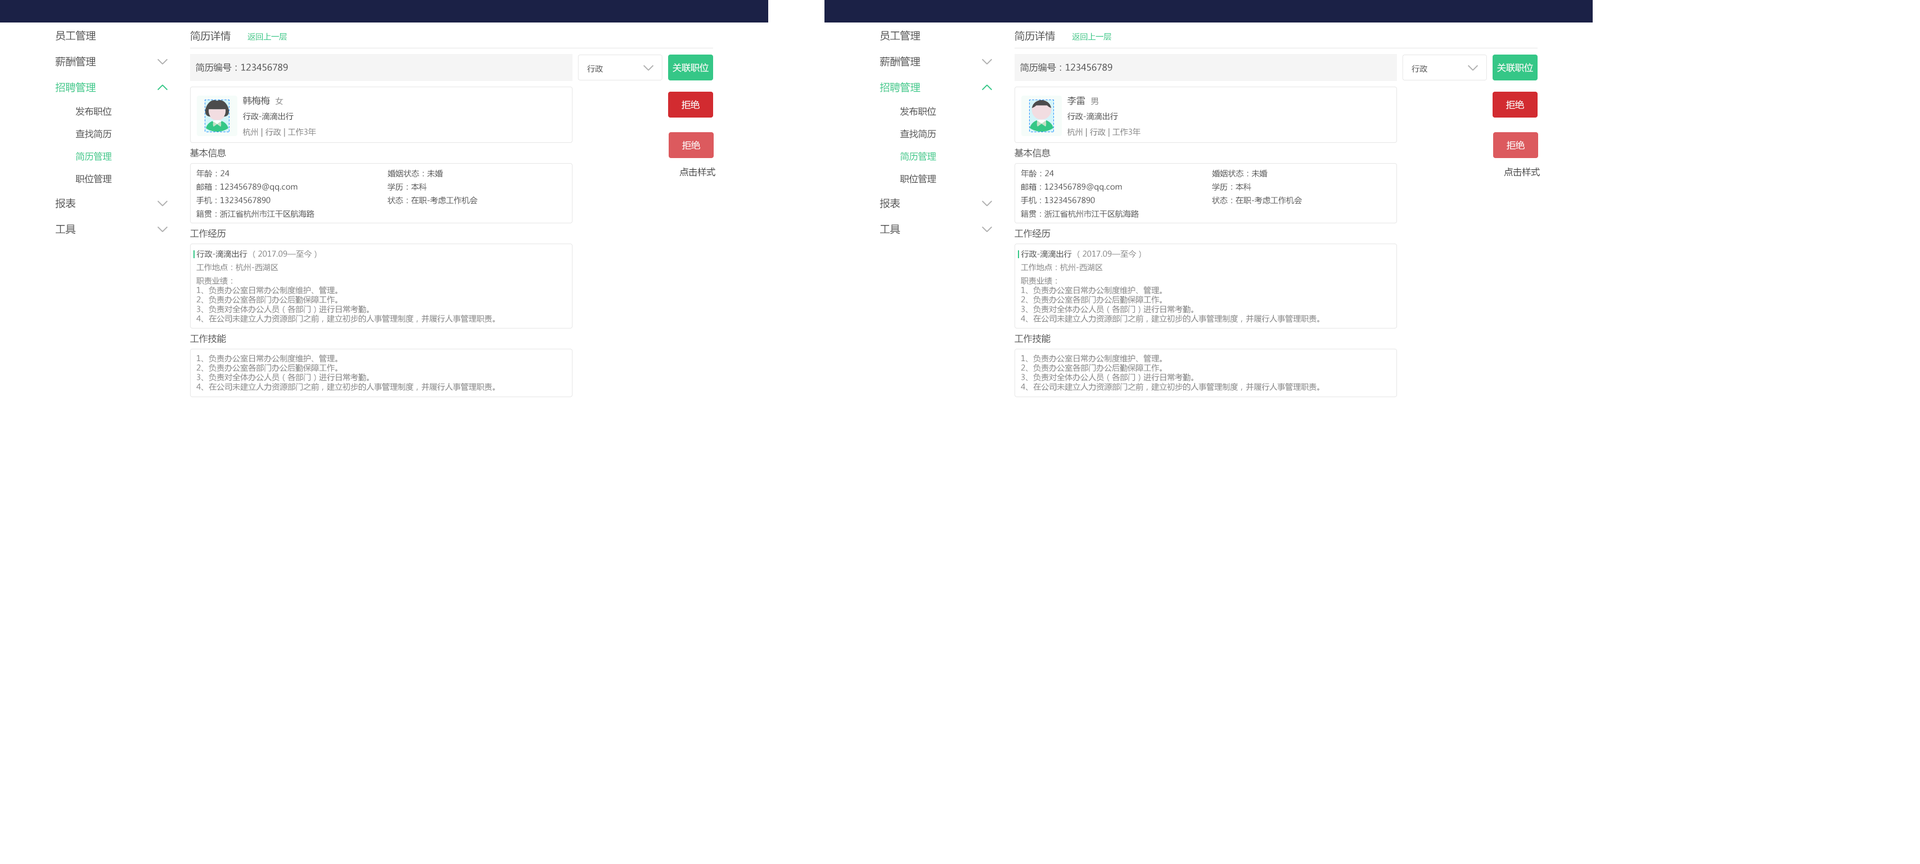
<style>
.page{position:relative;width:1920px;height:864px;background:#ffffff}
.page>*{position:absolute;margin:0}
.t1{font:10.1px "MicrosoftYaHei";color:#4d4d4d}
.t2{font:7.9px "MicrosoftYaHei";color:#35c787}
.t3{font:9px "MicrosoftYaHei";color:#4d4d4d}
.t4{font:7.9px "MicrosoftYaHei";color:#4d4d4d}
.t5{font:9px "MicrosoftYaHei";color:#ffffff}
.t6{font:10.1px "MicrosoftYaHei";color:#35c787}
.t7{font:7.9px "MicrosoftYaHei";color:#808080}
.t8{font:9px "MicrosoftYaHei";color:#35c787}
.t9{font:9px "MicrosoftYaHei";color:#393939}
.t10{font:7.7px "MicrosoftYaHei";color:#4d4d4d}
.t11{font:7.7px "MicrosoftYaHei";color:#808080}
</style>
<div class="page">
<p class="t1" style="left:56px;top:30px;width:40px;height:10px">员工管理</p>
<p class="t1" style="left:190px;top:30px;width:41px;height:11px">简历详情</p>
<p class="t2" style="left:248px;top:33px;width:39px;height:7px">返回上一层</p>
<p class="t1" style="left:880px;top:30px;width:41px;height:10px">员工管理</p>
<p class="t1" style="left:1015px;top:30px;width:40px;height:11px">简历详情</p>
<p class="t2" style="left:1072px;top:33px;width:40px;height:7px">返回上一层</p>
<p class="t1" style="left:55px;top:56px;width:41px;height:10px">薪酬管理</p>
<p class="t3" style="left:196px;top:63px;width:92px;height:9px">简历编号：123456789</p>
<p class="t4" style="left:587px;top:65px;width:16px;height:8px">行政</p>
<p class="t5" style="left:673px;top:63px;width:36px;height:9px">关联职位</p>
<p class="t1" style="left:880px;top:56px;width:41px;height:10px">薪酬管理</p>
<p class="t3" style="left:1020px;top:63px;width:93px;height:9px">简历编号：123456789</p>
<p class="t4" style="left:1412px;top:65px;width:16px;height:8px">行政</p>
<p class="t5" style="left:1497px;top:63px;width:36px;height:9px">关联职位</p>
<p class="t6" style="left:55px;top:82px;width:41px;height:10px">招聘管理</p>
<p class="t6" style="left:880px;top:82px;width:41px;height:10px">招聘管理</p>
<p class="t3" style="left:243px;top:96px;width:27px;height:9px">韩梅梅</p>
<p class="t7" style="left:276px;top:97px;width:8px;height:8px">女</p>
<p class="t5" style="left:682px;top:100px;width:18px;height:9px">拒绝</p>
<p class="t3" style="left:1068px;top:96px;width:17px;height:9px">李雷</p>
<p class="t7" style="left:1091px;top:97px;width:8px;height:8px">男</p>
<p class="t5" style="left:1506px;top:100px;width:18px;height:9px">拒绝</p>
<p class="t3" style="left:75px;top:107px;width:37px;height:9px">发布职位</p>
<p class="t4" style="left:243px;top:112px;width:51px;height:8px">行政-滴滴出行</p>
<p class="t3" style="left:900px;top:107px;width:37px;height:9px">发布职位</p>
<p class="t4" style="left:1068px;top:112px;width:50px;height:8px">行政-滴滴出行</p>
<p class="t3" style="left:75px;top:129px;width:37px;height:9px">查找简历</p>
<p class="t7" style="left:243px;top:128px;width:73px;height:9px">杭州 | 行政 | 工作3年</p>
<p class="t3" style="left:900px;top:129px;width:37px;height:9px">查找简历</p>
<p class="t7" style="left:1068px;top:128px;width:73px;height:9px">杭州 | 行政 | 工作3年</p>
<p class="t3" style="left:190px;top:148px;width:36px;height:10px">基本信息</p>
<p class="t5" style="left:682px;top:141px;width:18px;height:9px">拒绝</p>
<p class="t3" style="left:1015px;top:148px;width:36px;height:10px">基本信息</p>
<p class="t5" style="left:1507px;top:141px;width:18px;height:9px">拒绝</p>
<p class="t8" style="left:75px;top:152px;width:37px;height:9px">简历管理</p>
<p class="t8" style="left:900px;top:152px;width:37px;height:9px">简历管理</p>
<p class="t4" style="left:196px;top:169px;width:34px;height:9px">年龄：24</p>
<p class="t4" style="left:388px;top:169px;width:55px;height:8px">婚姻状态：未婚</p>
<p class="t9" style="left:680px;top:167px;width:36px;height:10px">点击样式</p>
<p class="t4" style="left:1021px;top:169px;width:33px;height:9px">年龄：24</p>
<p class="t4" style="left:1212px;top:169px;width:56px;height:8px">婚姻状态：未婚</p>
<p class="t9" style="left:1504px;top:167px;width:36px;height:10px">点击样式</p>
<p class="t3" style="left:75px;top:174px;width:37px;height:9px">职位管理</p>
<p class="t10" style="left:197px;top:183px;width:101px;height:9px">邮箱：123456789@qq.com</p>
<p class="t10" style="left:388px;top:183px;width:39px;height:8px">学历：本科</p>
<p class="t3" style="left:900px;top:174px;width:37px;height:9px">职位管理</p>
<p class="t10" style="left:1022px;top:183px;width:100px;height:9px">邮箱：123456789@qq.com</p>
<p class="t10" style="left:1212px;top:183px;width:40px;height:8px">学历：本科</p>
<p class="t1" style="left:55px;top:198px;width:21px;height:10px">报表</p>
<p class="t4" style="left:196px;top:196px;width:75px;height:8px">手机：13234567890</p>
<p class="t4" style="left:388px;top:196px;width:90px;height:8px">状态：在职-考虑工作机会</p>
<p class="t1" style="left:880px;top:198px;width:21px;height:10px">报表</p>
<p class="t4" style="left:1021px;top:196px;width:74px;height:8px">手机：13234567890</p>
<p class="t4" style="left:1212px;top:196px;width:90px;height:8px">状态：在职-考虑工作机会</p>
<p class="t4" style="left:196px;top:210px;width:118px;height:8px">籍贯：浙江省杭州市江干区航海路</p>
<p class="t4" style="left:1021px;top:210px;width:118px;height:8px">籍贯：浙江省杭州市江干区航海路</p>
<p class="t1" style="left:56px;top:224px;width:20px;height:10px">工具</p>
<p class="t3" style="left:190px;top:229px;width:36px;height:9px">工作经历</p>
<p class="t1" style="left:880px;top:224px;width:21px;height:10px">工具</p>
<p class="t3" style="left:1015px;top:229px;width:36px;height:9px">工作经历</p>
<p class="t4" style="left:196px;top:250px;width:52px;height:8px">行政-滴滴出行</p>
<p class="t7" style="left:253px;top:250px;width:64px;height:8px">（2017.09—至今）</p>
<p class="t4" style="left:1021px;top:250px;width:51px;height:8px">行政-滴滴出行</p>
<p class="t7" style="left:1078px;top:250px;width:63px;height:8px">（2017.09—至今）</p>
<p class="t11" style="left:196px;top:263px;width:82px;height:8px">工作地点：杭州-西湖区</p>
<p class="t11" style="left:1021px;top:263px;width:82px;height:8px">工作地点：杭州-西湖区</p>
<p class="t7" style="left:196px;top:277px;width:299px;height:46px">职责业绩：<br>1、负责办公室日常办公制度维护、管理。<br>2、负责办公室各部门办公后勤保障工作。<br>3、负责对全体办公人员（各部门）进行日常考勤。<br>4、在公司未建立人力资源部门之前，建立初步的人事管理制度，并履行人事管理职责。</p>
<p class="t7" style="left:1021px;top:277px;width:299px;height:46px">职责业绩：<br>1、负责办公室日常办公制度维护、管理。<br>2、负责办公室各部门办公后勤保障工作。<br>3、负责对全体办公人员（各部门）进行日常考勤。<br>4、在公司未建立人力资源部门之前，建立初步的人事管理制度，并履行人事管理职责。</p>
<p class="t3" style="left:190px;top:334px;width:36px;height:9px">工作技能</p>
<p class="t3" style="left:1015px;top:334px;width:36px;height:9px">工作技能</p>
<p class="t7" style="left:196px;top:354px;width:299px;height:37px">1、负责办公室日常办公制度维护、管理。<br>2、负责办公室各部门办公后勤保障工作。<br>3、负责对全体办公人员（各部门）进行日常考勤。<br>4、在公司未建立人力资源部门之前，建立初步的人事管理制度，并履行人事管理职责。</p>
<p class="t7" style="left:1021px;top:354px;width:299px;height:37px">1、负责办公室日常办公制度维护、管理。<br>2、负责办公室各部门办公后勤保障工作。<br>3、负责对全体办公人员（各部门）进行日常考勤。<br>4、在公司未建立人力资源部门之前，建立初步的人事管理制度，并履行人事管理职责。</p>
</div>
